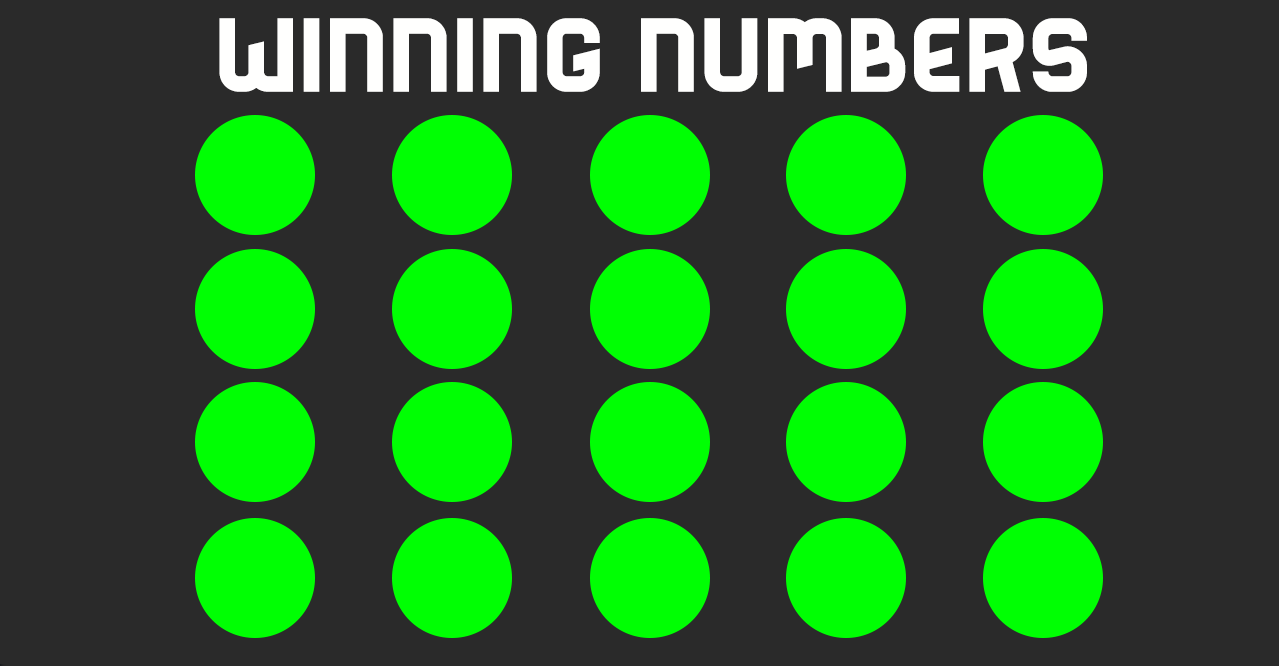
<style>
.page{position:relative;width:1279px;height:666px;background:#2a2a2a}
.page>*{position:absolute;margin:0}
.t1{font:122px "BenderSolid";color:#fffffe}
</style>
<div class="page">
<p class="t1" style="left:219px;top:18px;width:868px;height:74px">WINNING NUMBERS</p>
</div>
